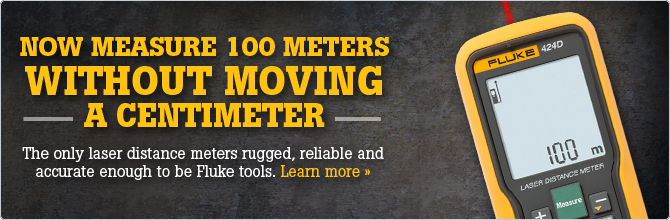
<style>
.page{position:relative;width:670px;height:220px}
.page>*{position:absolute;margin:0}
.t1{font:26.8px/44.8px "BotonPro-Bold";color:#ffc20e;text-transform:uppercase}
.t2{font:39.5px/39.5px "BotonPro-Bold";color:#ffc20e;text-transform:uppercase}
.t3{font:33.1px/32px "BotonPro-Bold";color:#ffc20e;text-transform:uppercase}
.t4{font:16px/18px "BotonPro-Regular";color:#ffffff}
.t5{font:16px/18px "BotonPro-Regular";color:#ffc20e}
</style>
<div class="page">
<p class="t1" style="left:20px;top:37px;width:369px;height:90px;text-align:center">Now Measure 100 Meters<br><span class="t2">without moving<br></span><span class="t3">A Centimeter</span></p>
<p class="t4" style="left:22px;top:147px;width:362px;height:33px;text-align:center">The only laser distance meters rugged, reliable and accurate enough to be Fluke tools. <span class="t5">Learn more »</span></p>
</div>
